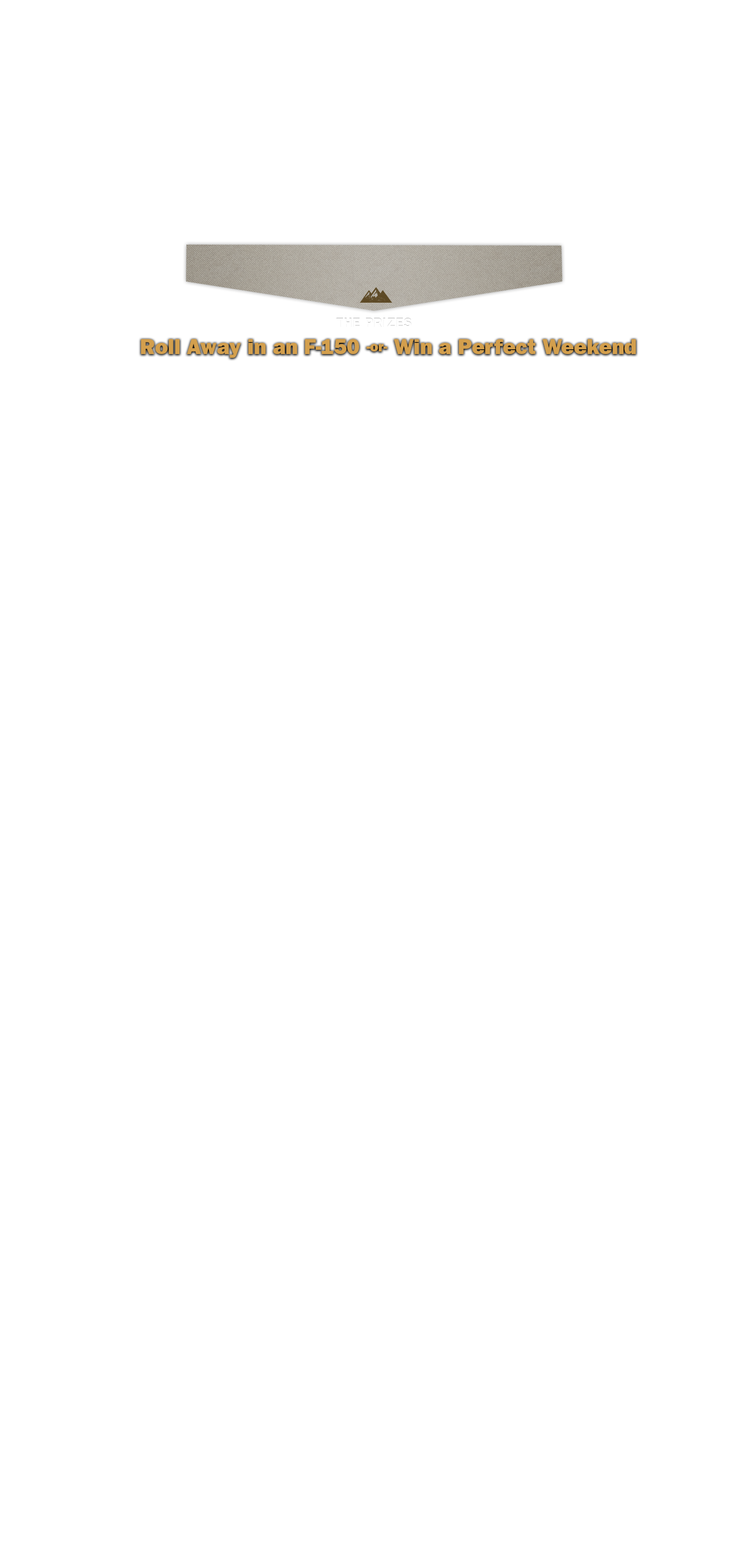
<style>
.page{position:relative;width:748px;height:1568px;background:#ffffff}
.page>*{position:absolute;margin:0}
.t1{font:21.4px "FranklinGothic-Heavy";color:#d39f4d}
.t2{font:13.9px "FranklinGothic-Heavy";color:#d39f4d}
</style>
<div class="page">
<p class="t1" style="left:141px;top:339px;width:495px;height:19px">Roll Away in an F-150 <span class="t2">-or- </span>Win a Perfect Weekend</p>
</div>
